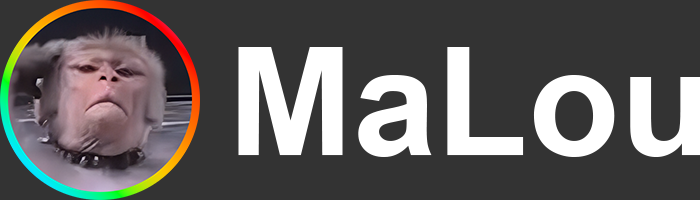
<style>
.page{position:relative;width:700px;height:200px;background:#333333}
.page>*{position:absolute;margin:0}
.t1{font:150px "Arial-BoldMT";color:#ffffff}
</style>
<div class="page">
<p class="t1" style="left:238px;top:47px;width:464px;height:110px">MaLou</p>
</div>
